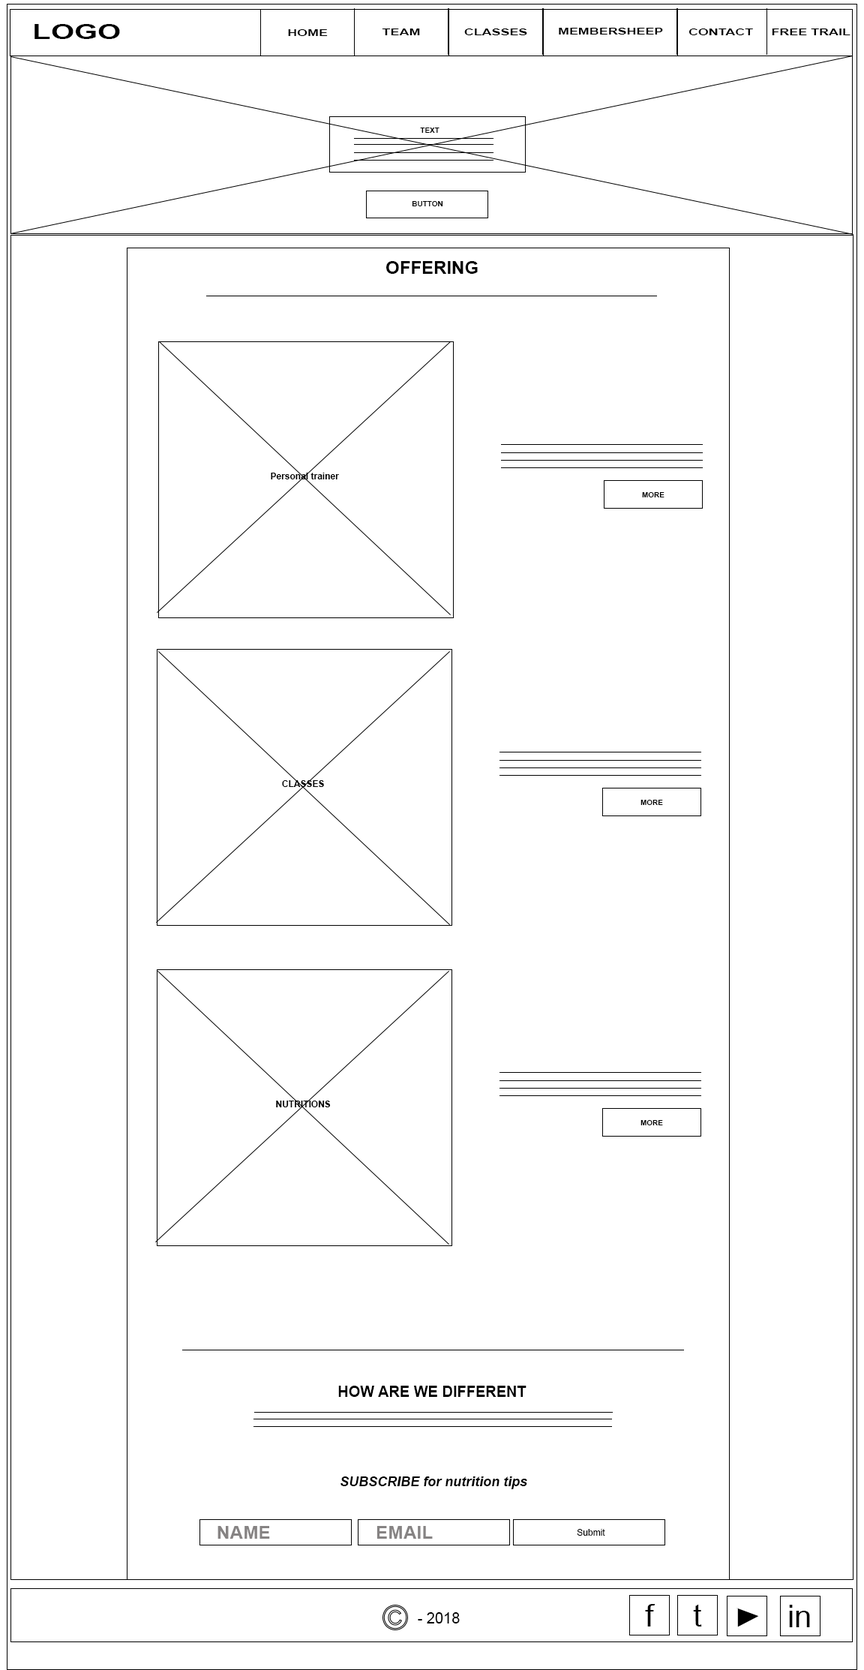
<style>
.page{position:relative;width:864px;height:1670px;background:#ffffff}
.page>*{position:absolute;margin:0}
.t1{font:20.1px "Arial-BoldMT";color:#000000;scale:1.49 1}
.t2{font:9px "Arial-BoldMT";color:#000000;scale:1.49 1}
.t3{font:7.5px "Arial-BoldMT";color:#000000}
.t4{font:18px "Arial-BoldMT";color:#000000}
.t5{font:9px "Arial-BoldMT";color:#000000}
.t6{font:15px "Arial-BoldMT";color:#000000}
.t7{font:13.5px "Arial-BoldItalicMT";color:#000000}
.t8{font:18.2px "Arial-BoldMT";color:#868383}
.t9{font:9px "ArialMT";color:#000000}
.t10{font:15px "ArialMT";color:#000000}
.t11{font:31.1px "ArialMT";color:#000000}
</style>
<div class="page">
<p class="t1" style="left:34px;top:24px;width:86px;height:15px">LOGO</p>
<p class="t2" style="left:288px;top:29px;width:40px;height:7px">HOME</p>
<p class="t2" style="left:382px;top:28px;width:38px;height:7px">TEAM</p>
<p class="t2" style="left:464px;top:28px;width:63px;height:7px">CLASSES</p>
<p class="t2" style="left:559px;top:28px;width:104px;height:6px">MEMBERSHEEP</p>
<p class="t2" style="left:688px;top:28px;width:65px;height:7px">CONTACT</p>
<p class="t2" style="left:772px;top:28px;width:78px;height:7px">FREE TRAIL</p>
<p class="t3" style="left:420px;top:128px;width:20px;height:5px">TEXT</p>
<p class="t3" style="left:412px;top:201px;width:31px;height:5px">BUTTON</p>
<p class="t4" style="left:386px;top:261px;width:92px;height:13px">OFFERING</p>
<p class="t5" style="left:271px;top:472px;width:68px;height:7px">Personal trainer</p>
<p class="t3" style="left:642px;top:492px;width:22px;height:5px">MORE</p>
<p class="t5" style="left:282px;top:780px;width:42px;height:7px">CLASSES</p>
<p class="t3" style="left:640px;top:800px;width:23px;height:5px">MORE</p>
<p class="t5" style="left:276px;top:1100px;width:55px;height:7px">NUTRITIONS</p>
<p class="t3" style="left:640px;top:1120px;width:23px;height:5px">MORE</p>
<p class="t6" style="left:338px;top:1385px;width:188px;height:11px">HOW ARE WE DIFFERENT</p>
<p class="t7" style="left:340px;top:1476px;width:187px;height:13px">SUBSCRIBE for nutrition tips</p>
<p class="t8" style="left:218px;top:1526px;width:52px;height:12px">NAME</p>
<p class="t8" style="left:376px;top:1526px;width:57px;height:12px">EMAIL</p>
<p class="t9" style="left:577px;top:1528px;width:28px;height:7px">Submit</p>
<p class="t10" style="left:418px;top:1612px;width:42px;height:11px">- 2018</p>
<p class="t11" style="left:645px;top:1604px;width:11px;height:22px">f</p>
<p class="t11" style="left:693px;top:1604px;width:9px;height:22px">t</p>
<p class="t11" style="left:789px;top:1604px;width:21px;height:23px">in</p>
</div>
